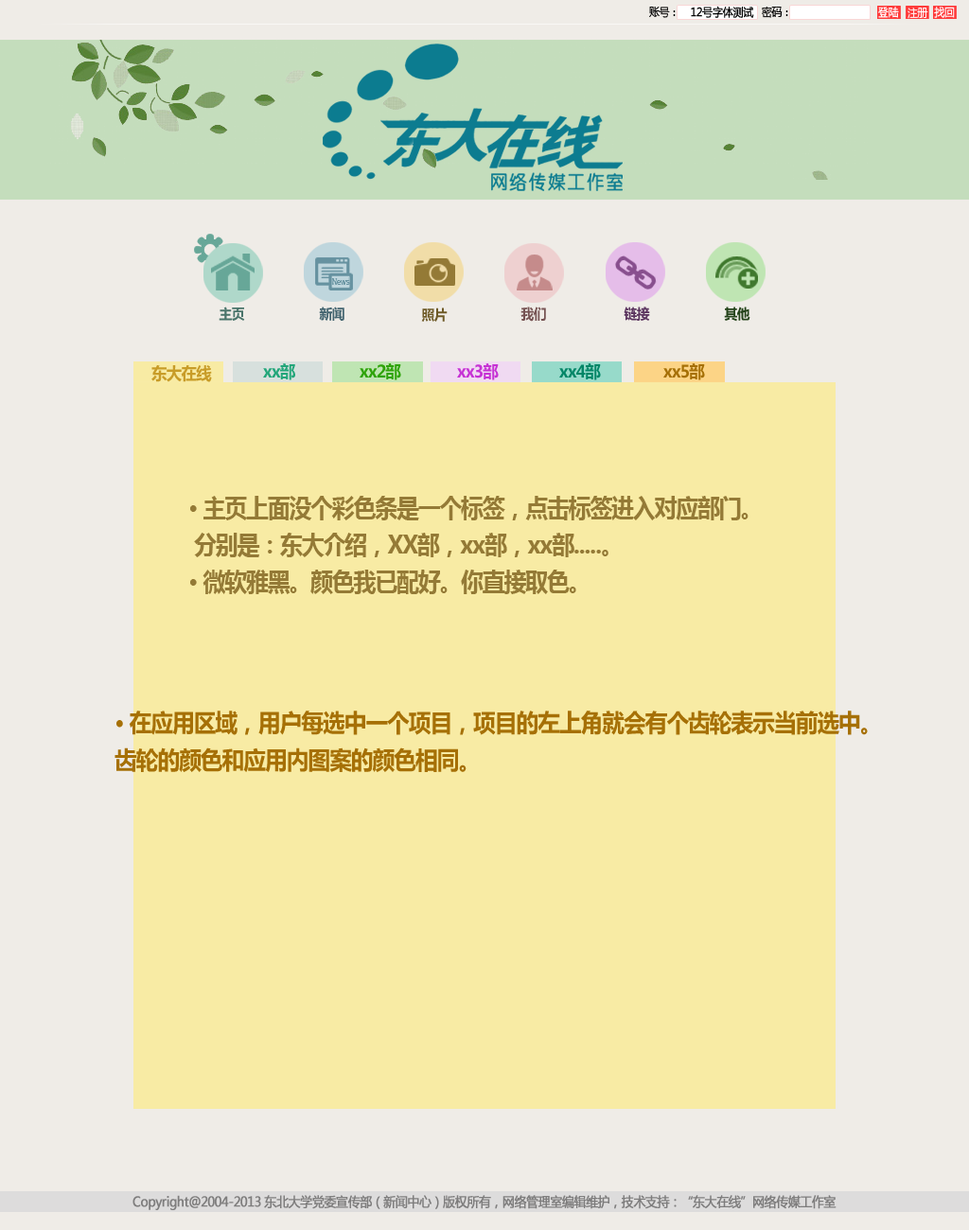
<style>
.page{position:relative;width:969px;height:1230px;background:#f8eba4}
.page>*{position:absolute;margin:0}
.t1{font:11.4px "MicrosoftYaHei";letter-spacing:-0.04em;color:#000000;font-weight:bold;scale:0.91 1}
.t2{font:11.4px "MicrosoftYaHei";letter-spacing:-0.04em;color:#000000;scale:0.91 1}
.t3{font:14.2px "MicrosoftYaHei-Bold";letter-spacing:-0.04em;color:#49746a;scale:0.91 1}
.t4{font:14.2px "MicrosoftYaHei-Bold";letter-spacing:-0.04em;color:#446570;scale:0.91 1}
.t5{font:14.2px "MicrosoftYaHei-Bold";letter-spacing:-0.04em;color:#6e5a27;scale:0.91 1}
.t6{font:14.2px "MicrosoftYaHei-Bold";letter-spacing:-0.04em;color:#765353;scale:0.91 1}
.t7{font:14.2px "MicrosoftYaHei-Bold";letter-spacing:-0.04em;color:#5b355f;scale:0.91 1}
.t8{font:14.2px "MicrosoftYaHei-Bold";letter-spacing:-0.04em;color:#24431a;scale:0.91 1}
.t9{font:17px "MicrosoftYaHei-Bold";letter-spacing:-0.04em;color:#c89c28;scale:0.91 1}
.t10{font:17px "MicrosoftYaHei-Bold";letter-spacing:-0.04em;color:#23a67a;scale:0.91 1}
.t11{font:17px "MicrosoftYaHei-Bold";letter-spacing:-0.04em;color:#2ea309;scale:0.91 1}
.t12{font:17px "MicrosoftYaHei-Bold";letter-spacing:-0.04em;color:#c632d4;scale:0.91 1}
.t13{font:17px "MicrosoftYaHei-Bold";letter-spacing:-0.04em;color:#038667;scale:0.91 1}
.t14{font:17px "MicrosoftYaHei-Bold";letter-spacing:-0.04em;color:#a67006;scale:0.91 1}
.t15{font:24.6px/37.3px "MicrosoftYaHei-Bold";letter-spacing:-0.04em;color:#947a36;scale:0.91 1}
.t16{font:24.6px/37.3px "MicrosoftYaHei-Bold";letter-spacing:-0.04em;color:#a67006;scale:0.91 1}
.t17{font:13.3px "MicrosoftYaHei";letter-spacing:-0.04em;color:#7e7d7d;font-weight:bold;scale:0.91 1}
</style>
<div class="page">
<p class="t1" style="left:691px;top:6px;width:63px;height:12px">12号字体测试</p>
<p class="t2" style="left:649px;top:7px;width:27px;height:11px">账号：</p>
<p class="t2" style="left:762px;top:7px;width:26px;height:11px">密码：</p>
<p class="t3" style="left:219px;top:307px;width:26px;height:14px">主页</p>
<p class="t4" style="left:319px;top:307px;width:26px;height:14px">新闻</p>
<p class="t5" style="left:421px;top:308px;width:27px;height:14px">照片</p>
<p class="t6" style="left:521px;top:307px;width:25px;height:15px">我们</p>
<p class="t7" style="left:624px;top:307px;width:26px;height:14px">链接</p>
<p class="t8" style="left:724px;top:307px;width:27px;height:15px">其他</p>
<p class="t9" style="left:151px;top:365px;width:61px;height:17px">东大在线</p>
<p class="t10" style="left:263px;top:363px;width:32px;height:17px">xx部</p>
<p class="t11" style="left:360px;top:363px;width:41px;height:17px">xx2部</p>
<p class="t12" style="left:457px;top:363px;width:42px;height:17px">xx3部</p>
<p class="t13" style="left:559px;top:363px;width:42px;height:17px">xx4部</p>
<p class="t14" style="left:663px;top:363px;width:42px;height:17px">xx5部</p>
<p class="t15" style="left:190px;top:496px;width:559px;height:98px">· 主页上面没个彩色条是一个标签，点击标签进入对应部门。<br> 分别是：东大介绍，XX部，xx部，xx部.....。<br>· 微软雅黑。颜色我已配好。你直接取色。</p>
<p class="t16" style="left:115px;top:711px;width:753px;height:61px">· 在应用区域，用户每选中一个项目，项目的左上角就会有个齿轮表示当前选中。<br>齿轮的颜色和应用内图案的颜色相同。</p>
<p class="t17" style="left:133px;top:1195px;width:704px;height:16px">Copyright@2004-2013 东北大学党委宣传部（新闻中心）版权所有，网络管理室编辑维护，技术支持：“东大在线”网络传媒工作室</p>
</div>
